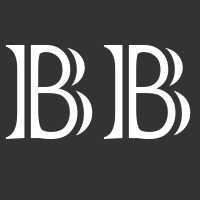
<style>
.page{position:relative;width:200px;height:200px;background:#333333}
.page>*{position:absolute;margin:0}
.t1{font:179.7px "ColonnaMT";color:#ffffff}
</style>
<div class="page">
<p class="t1" style="left:5px;top:45px;width:186px;height:94px">BB</p>
</div>
